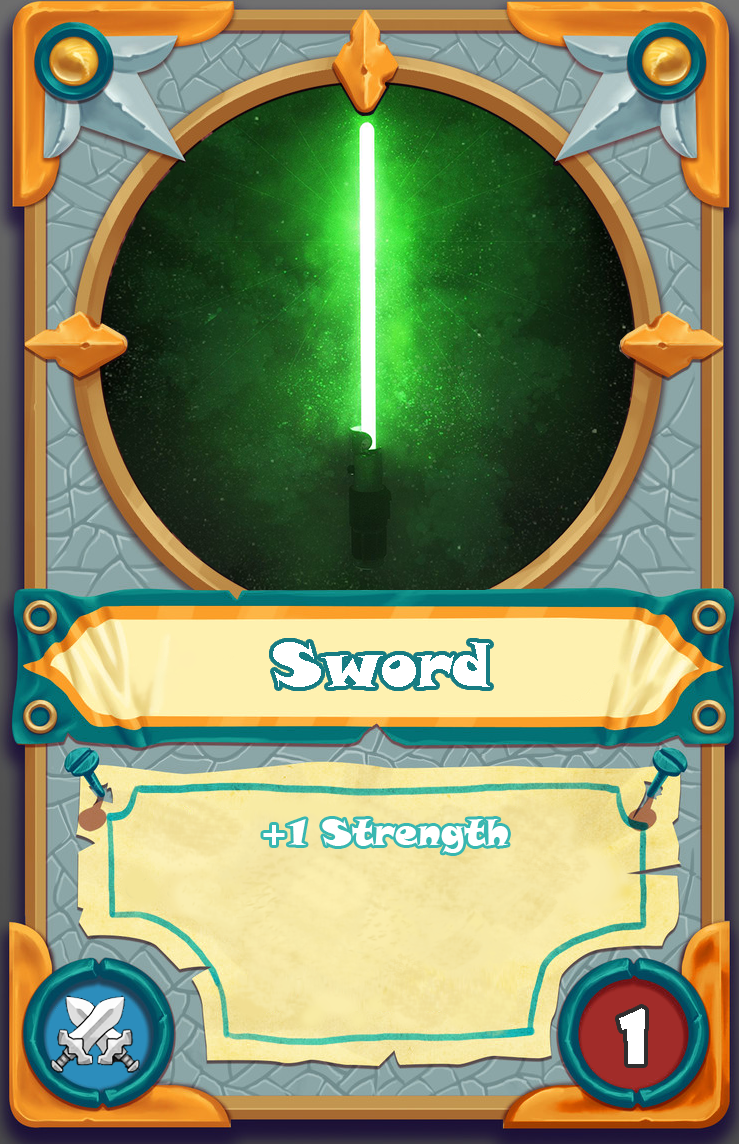
<style>
.page{position:relative;width:739px;height:1144px}
.page>*{position:absolute;margin:0}
.t1{font:60px "SnapITC-Regular";color:#ffffff}
.t2{font:36px "SnapITC-Regular";color:#ffffff}
.t3{font:72px "ShowcardGothic-Reg";color:#ffffff}
</style>
<div class="page">
<p class="t1" style="left:273px;top:642px;width:217px;height:45px">Sword</p>
<p class="t2" style="left:263px;top:819px;width:245px;height:34px">+1 Strength</p>
<p class="t3" style="left:619px;top:1008px;width:26px;height:56px">1</p>
</div>
